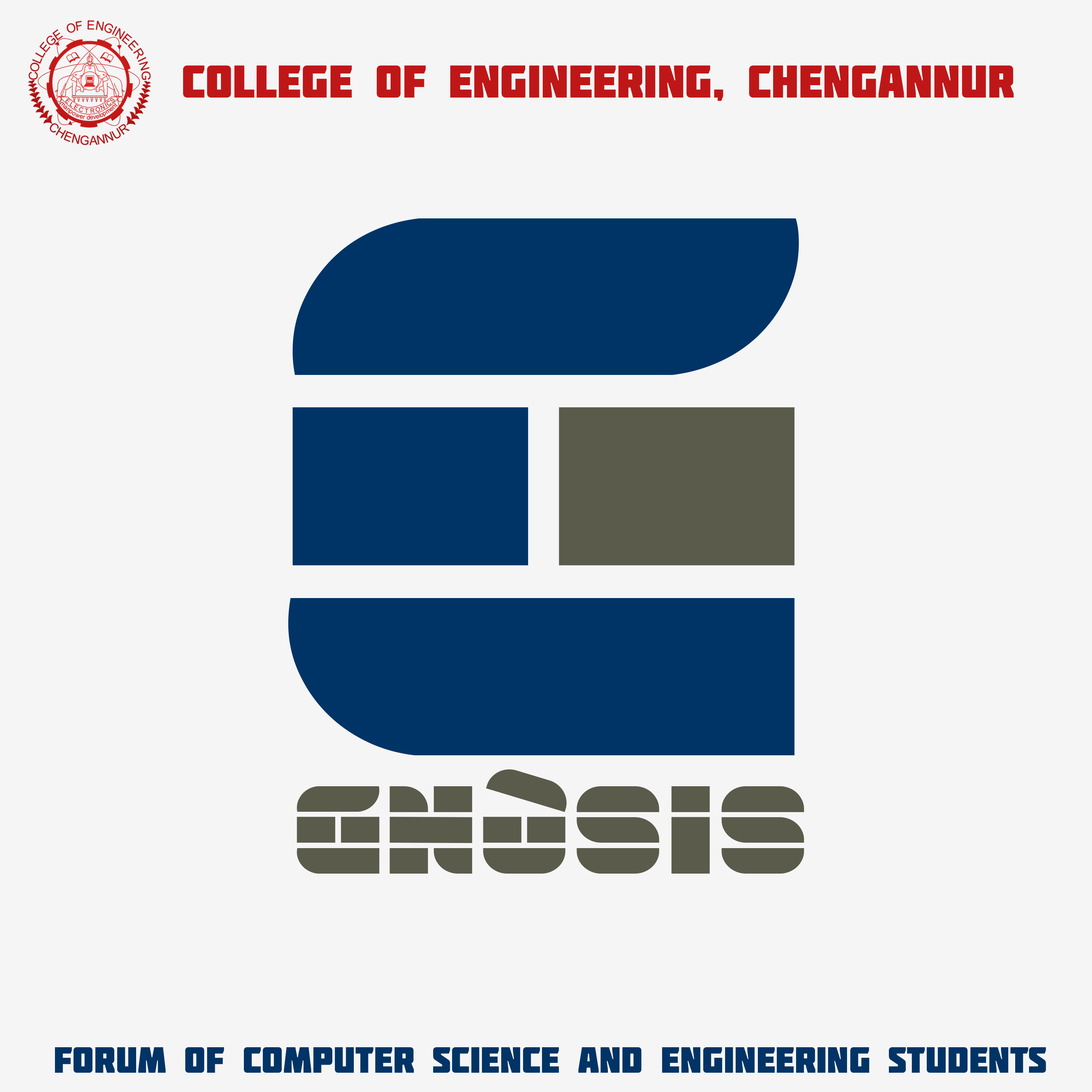
<style>
.page{position:relative;width:1092px;height:1092px;background:#f5f5f5}
.page>*{position:absolute;margin:0}
.t1{font:45.5px "Molot";color:#bf1718}
.t2{font:36.2px "Molot";color:#003466}
</style>
<div class="page">
<p class="t1" style="left:183px;top:65px;width:831px;height:36px">college of engineering, chengannur</p>
<p class="t2" style="left:55px;top:1047px;width:991px;height:26px">forum of computer science and engineering students</p>
</div>
